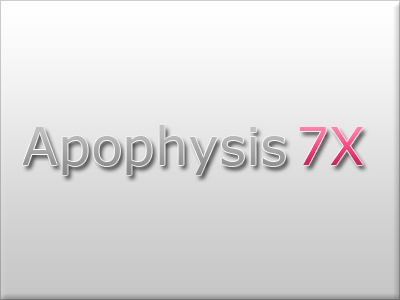
<style>
.page{position:relative;width:400px;height:300px}
.page>*{position:absolute;margin:0}
.t1{font:52.3px "Verdana";color:#a6a6a6}
.t2{font:52.3px "Verdana"}
</style>
<div class="page">
<p class="t1" style="left:22px;top:125px;width:263px;height:50px">Apophysis</p>
<p class="t2" style="left:299px;top:127px;width:64px;height:38px">7X</p>
</div>
